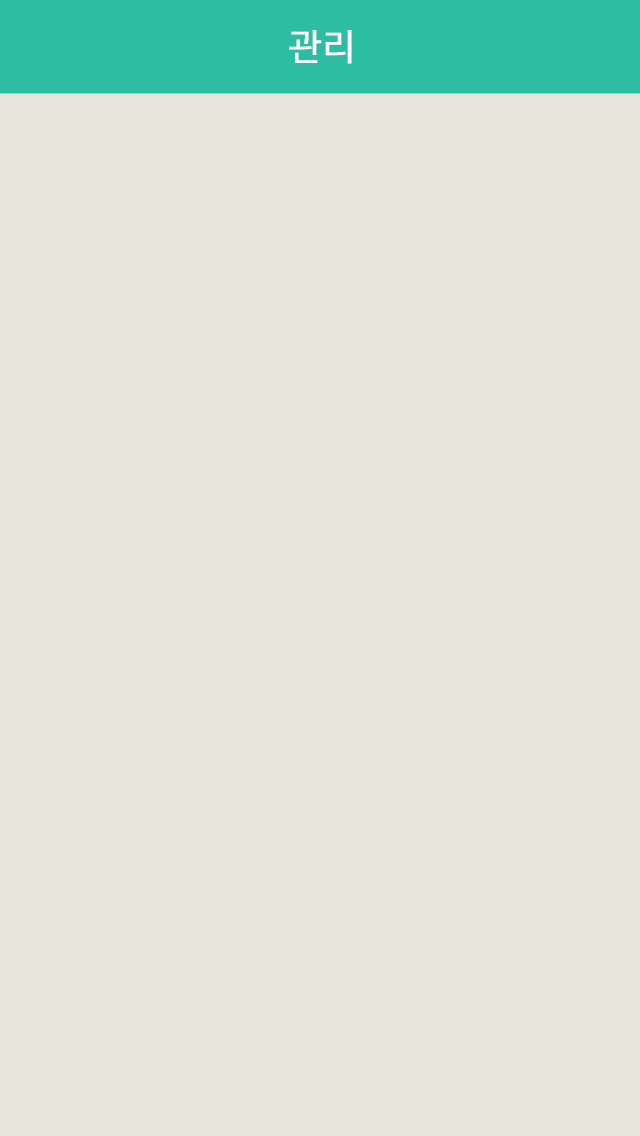
<style>
.page{position:relative;width:640px;height:1136px;background:#e6e6dc}
.page>*{position:absolute;margin:0}
.t1{font:36px "NanumSquareR";color:#ffffff;font-weight:bold}
</style>
<div class="page">
<p class="t1" style="left:289px;top:30px;width:63px;height:34px">관리</p>
</div>
